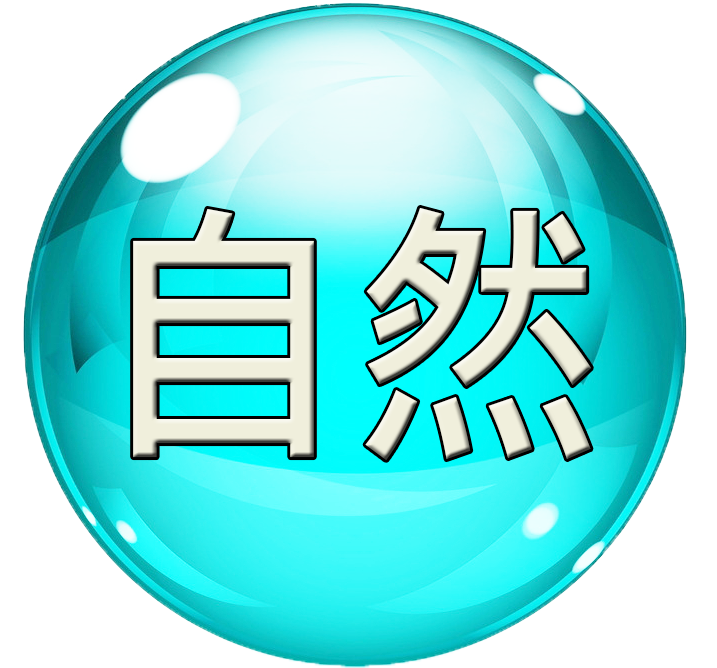
<style>
.page{position:relative;width:717px;height:668px;background:#ffffff}
.page>*{position:absolute;margin:0}
.t1{font:283.1px "MicrosoftJhengHeiBold";color:#f0efdc;scale:0.9 1}
</style>
<div class="page">
<p class="t1" style="left:133px;top:207px;width:458px;height:253px">自然</p>
</div>
